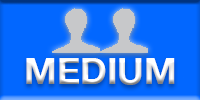
<style>
.page{position:relative;width:200px;height:100px;background:#0267ff}
.page>*{position:absolute;margin:0}
.t1{font:36px "HelveticaNeue-Bold";color:#ffffff}
</style>
<div class="page">
<p class="t1" style="left:26px;top:58px;width:149px;height:27px">MEDIUM</p>
</div>
